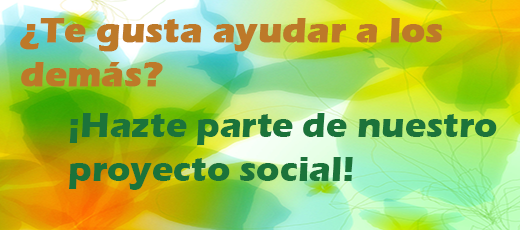
<style>
.page{position:relative;width:520px;height:230px}
.page>*{position:absolute;margin:0}
.t1{font:36px "ErasITC-Bold";color:#bd7929;font-weight:bold}
.t2{font:36px "ErasITC-Bold";color:#1b733a}
</style>
<div class="page">
<p class="t1" style="left:20px;top:18px;width:422px;height:69px">¿Te gusta ayudar a los<br>demás?</p>
<p class="t2" style="left:69px;top:113px;width:428px;height:77px">¡Hazte parte de nuestro <br>proyecto social!</p>
</div>
